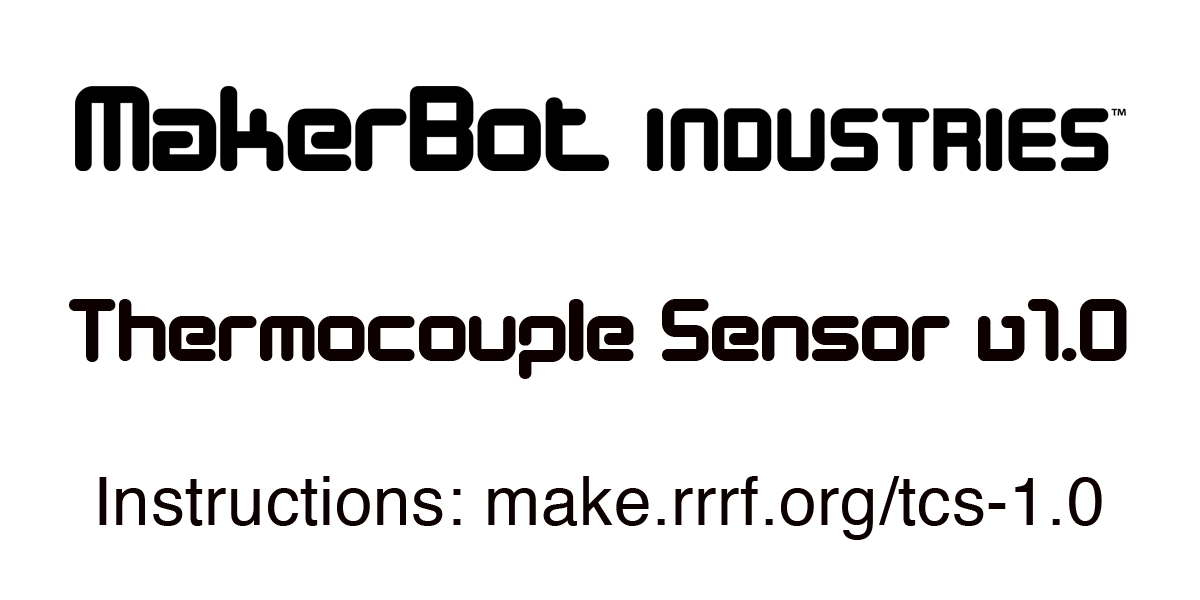
<style>
.page{position:relative;width:1200px;height:600px;background:#ffffff}
.page>*{position:absolute;margin:0}
.t1{font:90.3px "DesignerBlock";letter-spacing:0.01em;color:#0c0000}
.t2{font:67.4px "Helvetica";letter-spacing:0.01em;color:#0c0000}
</style>
<div class="page">
<p class="t1" style="left:69px;top:299px;width:1058px;height:80px">Thermocouple Sensor v1.0</p>
<p class="t2" style="left:99px;top:476px;width:1003px;height:64px">Instructions: make.rrrf.org/tcs-1.0</p>
</div>
